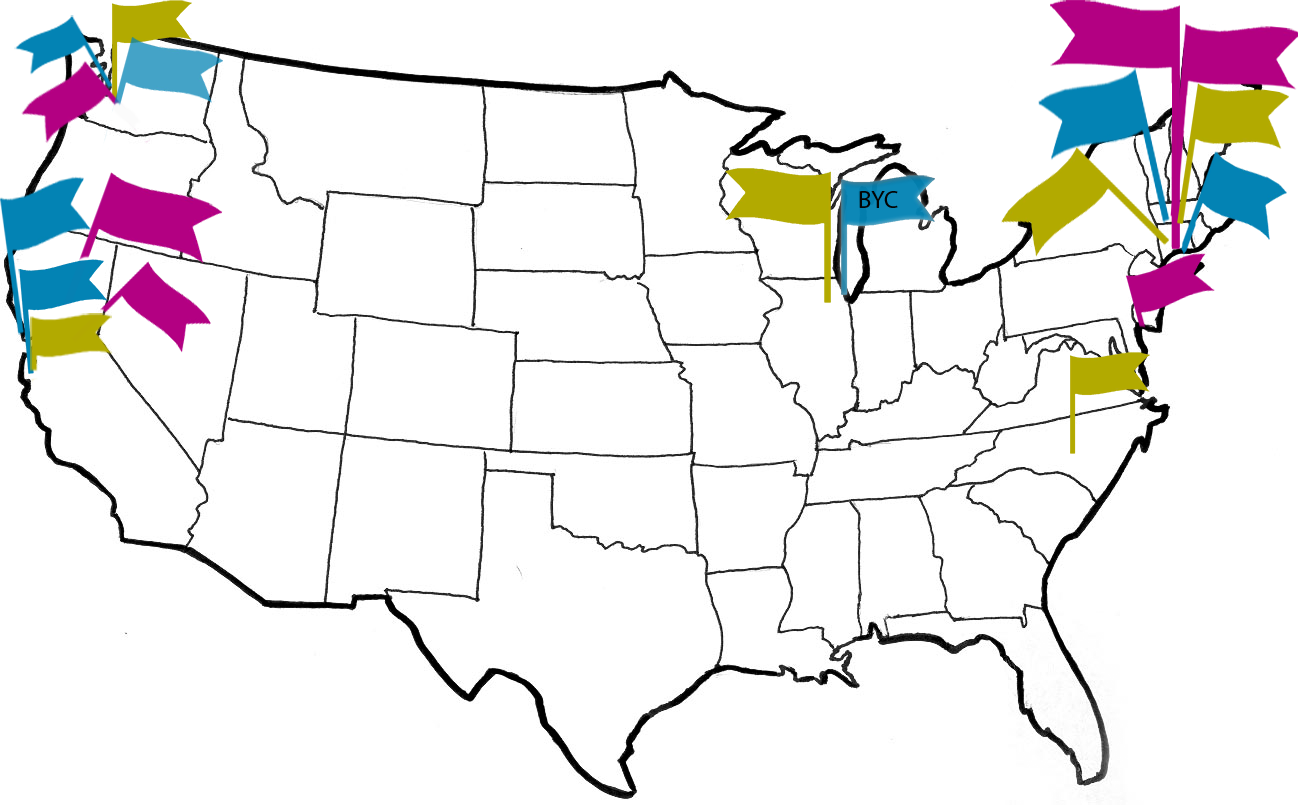
<style>
.page{position:relative;width:1298px;height:805px;background:#ffffff}
.page>*{position:absolute;margin:0}
.t1{font:12px "MyriadPro-Regular";color:#030302}
</style>
<div class="page">
<p class="t1" style="left:859px;top:191px;width:39px;height:17px">BYC</p>
</div>
